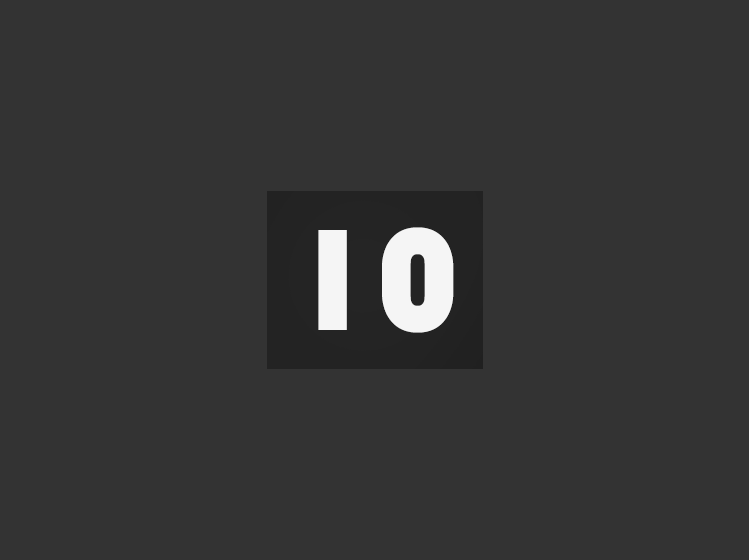
<style>
.page{position:relative;width:749px;height:560px;background:#333333}
.page>*{position:absolute;margin:0}
.t1{font:150px "Bauhaus93";color:#f5f5f5;font-variant:small-caps}
</style>
<div class="page">
<p class="t1" style="left:318px;top:227px;width:136px;height:106px">10</p>
</div>
